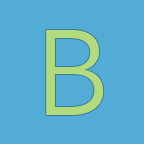
<style>
.page{position:relative;width:144px;height:144px;background:#52acd5}
.page>*{position:absolute;margin:0}
.t1{font:120px "AvenirNext-Regular";letter-spacing:0.025em;color:#b3db7e}
</style>
<div class="page">
<p class="t1" style="left:46px;top:30px;width:58px;height:85px">B</p>
</div>
